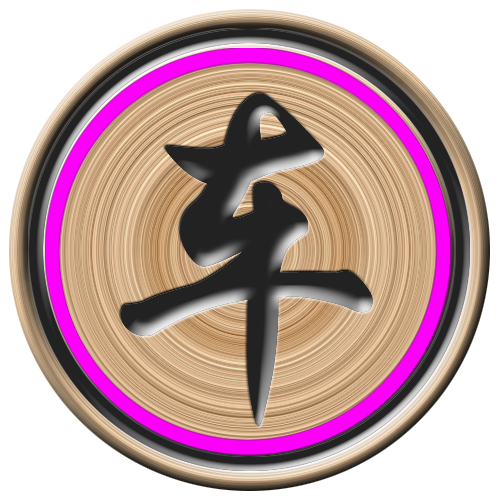
<style>
.page{position:relative;width:500px;height:500px;background:#ffffff}
.page>*{position:absolute;margin:0}
.t1{font:360px "STXingkai"}
</style>
<div class="page">
<p class="t1" style="left:121px;top:93px;width:252px;height:334px">车</p>
</div>
